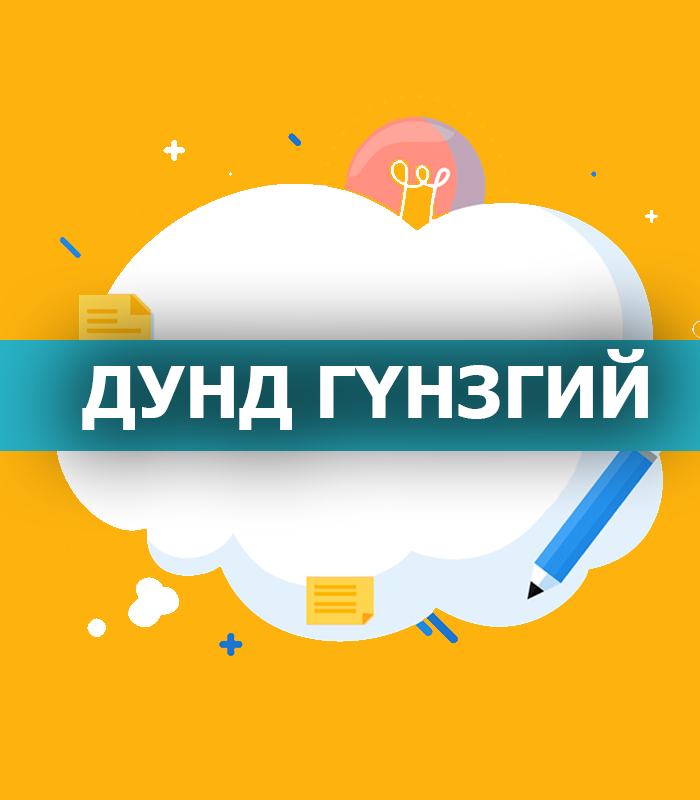
<style>
.page{position:relative;width:700px;height:800px;background:#fdb20d}
.page>*{position:absolute;margin:0}
.t1{font:71.3px "Tahoma-Bold";color:#ffffff;text-transform:uppercase}
</style>
<div class="page">
<p class="t1" style="left:82px;top:349px;width:566px;height:81px">дунд гүнзгий</p>
</div>
